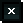
<style>
.page{position:relative;width:23px;height:23px;background:#070d0d}
.page>*{position:absolute;margin:0}
.t1{font:12px "Terminal";color:#ffffff}
</style>
<div class="page">
<p class="t1" style="left:8px;top:8px;width:7px;height:6px">x</p>
</div>
